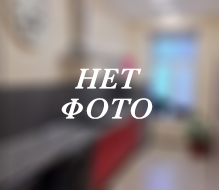
<style>
.page{position:relative;width:219px;height:190px}
.page>*{position:absolute;margin:0}
.t1{font:30px/15px "Baskerville-SemiBoldItalic";color:#ffffff}
</style>
<div class="page">
<p class="t1" style="left:61px;top:68px;width:92px;height:51px;text-align:center">НЕТ<br><br>ФОТО</p>
</div>
